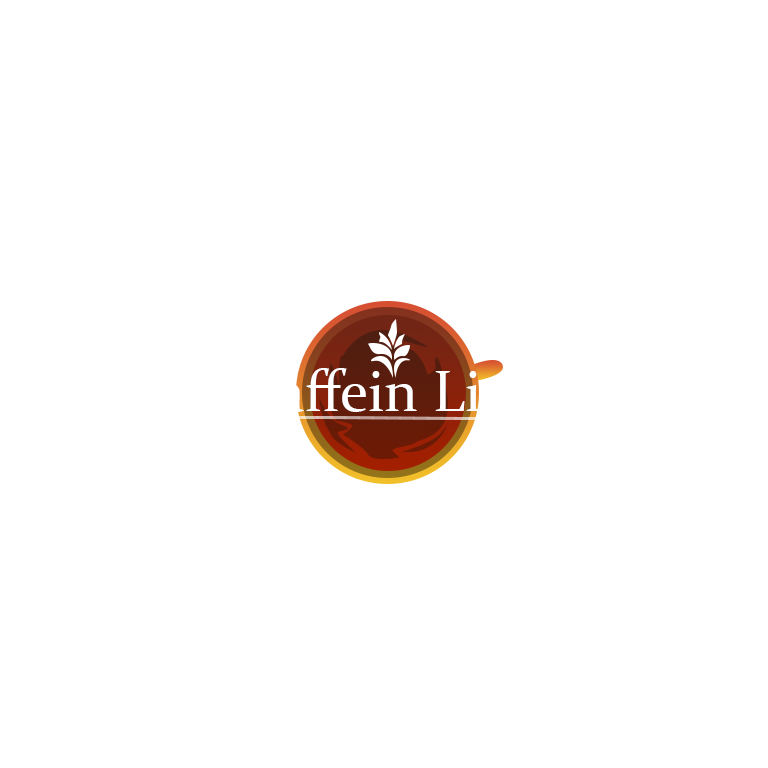
<style>
.page{position:relative;width:768px;height:768px;background:#ffffff}
.page>*{position:absolute;margin:0}
.t1{font:58px "Constantia";color:#ffffff}
</style>
<div class="page">
<p class="t1" style="left:241px;top:368px;width:300px;height:44px">Caffein Line</p>
</div>
